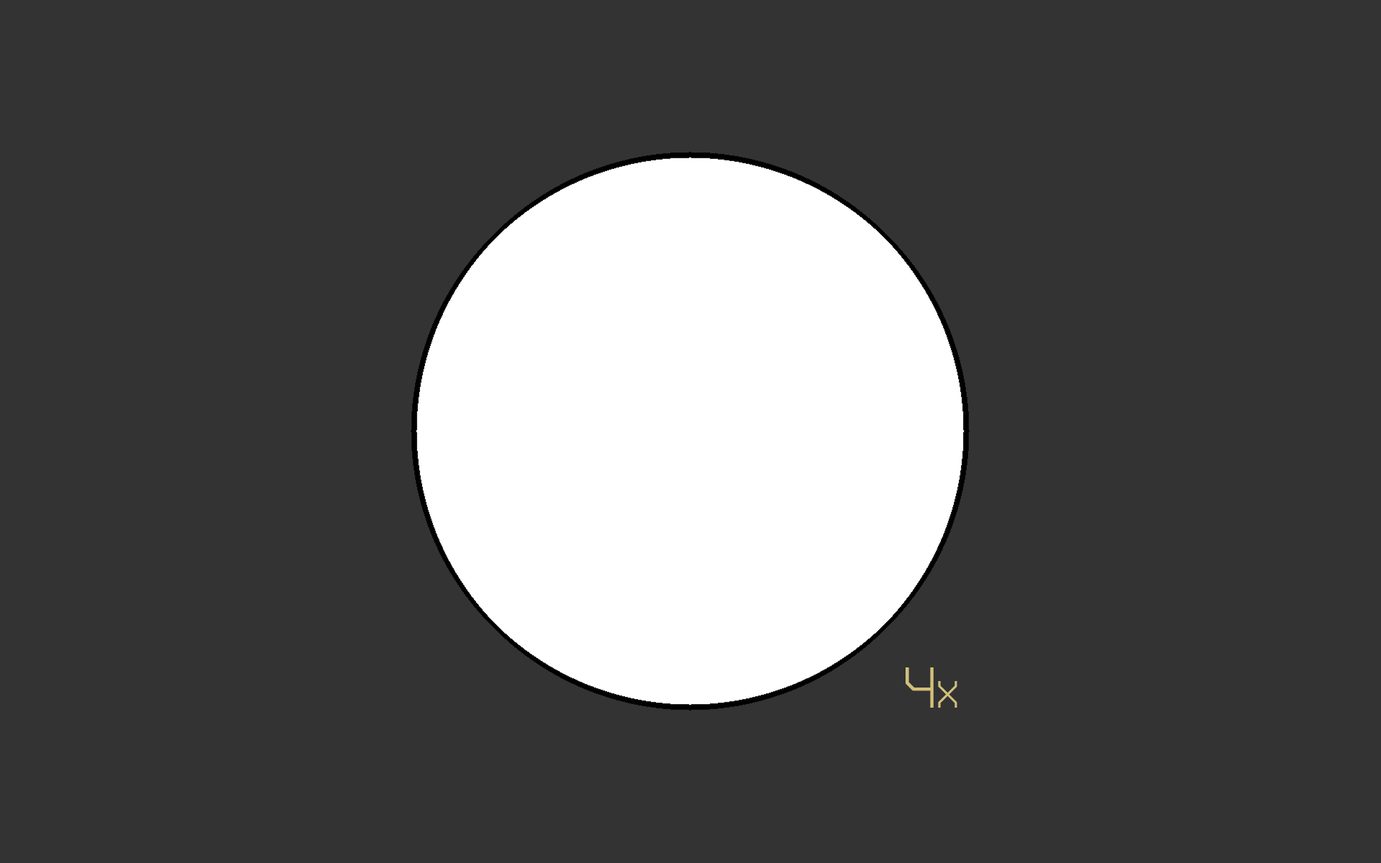
<style>
.page{position:relative;width:1381px;height:863px;background:#333333}
.page>*{position:absolute;margin:0}
.t1{font:57.6px "Arame-Thin";color:#d2bf7a}
.t2{font:38.1px "Arame-Thin";color:#d2bf7a}
</style>
<div class="page">
<p class="t1" style="left:906px;top:668px;width:52px;height:40px">4<span class="t2">x</span></p>
</div>
